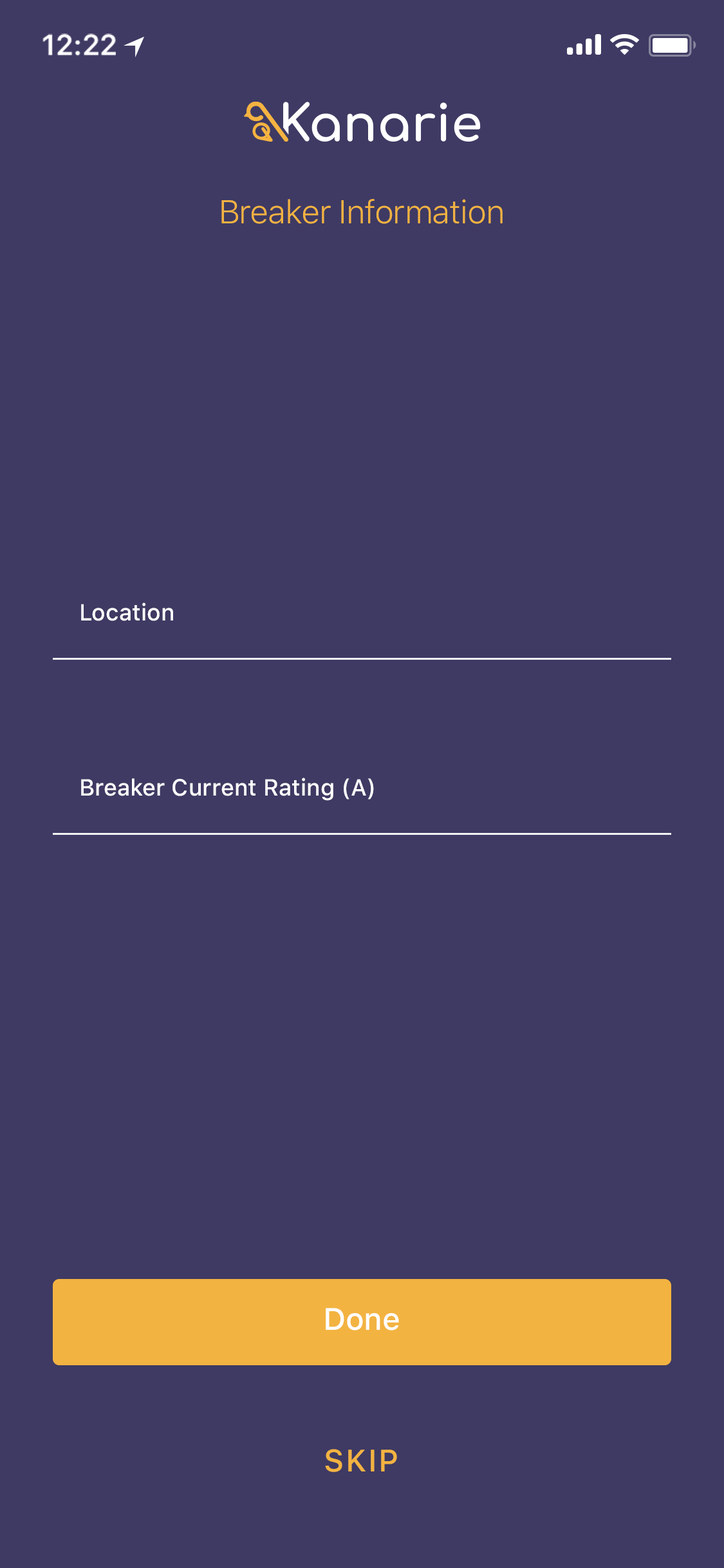
<style>
.page{position:relative;width:724px;height:1568px;background:#3e3a63}
.page>*{position:absolute;margin:0}
.t1{font:29px "SFProText-Semibold";letter-spacing:-0.02em;color:#ffffff}
.t2{font:32.8px "SFProText-Light";letter-spacing:-0.024em;color:#f3b341}
.t3{font:23.2px "SFProText-Medium";color:#ffffff}
.t4{font:30.9px "SFProText-Medium";letter-spacing:-0.01em;color:#ffffff}
.t5{font:30.9px "SFProText-Medium";letter-spacing:0.05em;color:#f3b341;text-transform:uppercase}
</style>
<div class="page">
<p class="t1" style="left:42px;top:33px;width:74px;height:23px">12:22</p>
<p class="t2" style="left:221px;top:199px;width:282px;height:25px">Breaker Information</p>
<p class="t3" style="left:81px;top:602px;width:92px;height:19px">Location</p>
<p class="t3" style="left:81px;top:778px;width:293px;height:23px">Breaker Current Rating (A)</p>
<p class="t4" style="left:326px;top:1308px;width:73px;height:22px">Done</p>
<p class="t5" style="left:325px;top:1449px;width:72px;height:23px">Skip</p>
</div>
